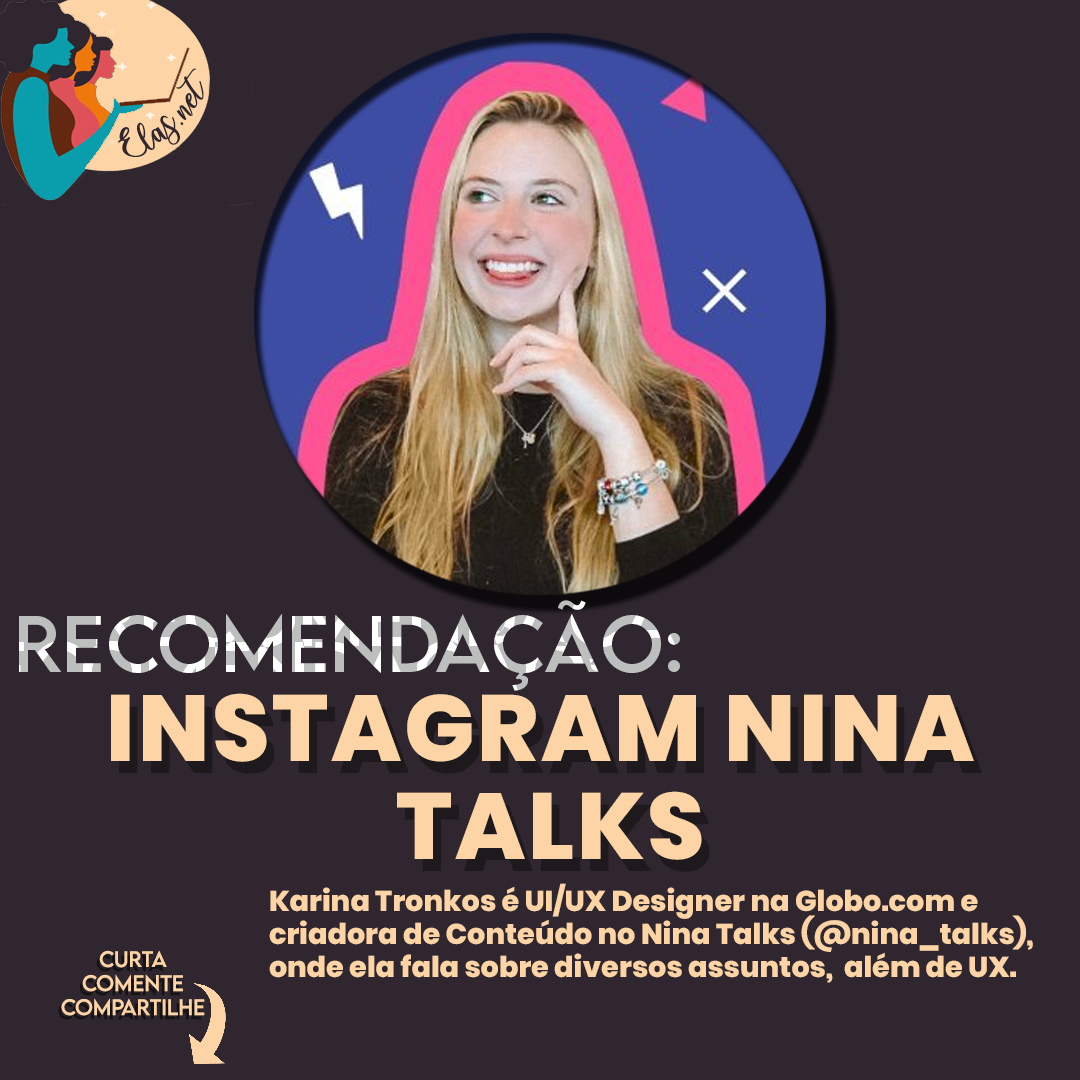
<style>
.page{position:relative;width:1080px;height:1080px;background:#2f262f}
.page>*{position:absolute;margin:0}
.t1{font:25px "charlinda-Regular";color:#2f262f;scale:1.18 1}
.t2{font:71.7px "LEMONMILK-Regular";letter-spacing:0.005em}
.t3{font:93.5px/98.3px "Poppins-ExtraBold";letter-spacing:0.03em;color:#fcd4a5}
.t4{font:93.5px/98.3px "Poppins-ExtraBold";letter-spacing:0.03em}
.t5{font:28.7px/33.2px "Poppins-ExtraBold";color:#fcd4a5}
.t6{font:20px "LEMONMILK-Regular";color:#fcd4a5}
</style>
<div class="page">
<p class="t1" style="left:118px;top:68px;width:86px;height:89px;rotate:-43deg">Elas.net</p>
<p class="t2" style="left:19px;top:600px;width:661px;height:91px">Recomendação:</p>
<p class="t3" style="left:111px;top:693px;width:863px;height:167px;text-align:center">INSTAGRAM NINA <br>TALKS</p>
<p class="t4" style="left:119px;top:705px;width:863px;height:167px;text-align:center">INSTAGRAM NINA <br>TALKS</p>
<p class="t5" style="left:269px;top:883px;width:764px;height:100px">Karina Tronkos é UI/UX Designer na Globo.com e <br>criadora de Conteúdo no Nina Talks (@nina_talks),<br>onde ela fala sobre diversos assuntos,  além de UX.</p>
<p class="t6" style="left:61px;top:950px;width:144px;height:66px;text-align:center">Curta<br>Comente<br>Compartilhe</p>
</div>
